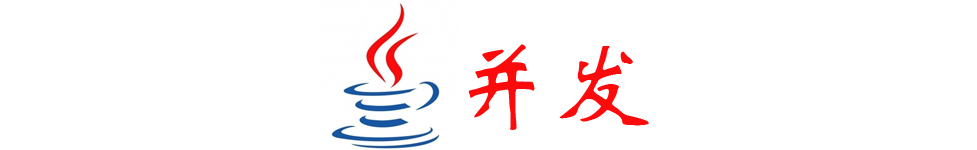
<style>
.page{position:relative;width:977px;height:150px;background:#ffffff}
.page>*{position:absolute;margin:0}
.t1{font:100px "STXinwei";color:#fb0b0c}
</style>
<div class="page">
<p class="t1" style="left:468px;top:44px;width:181px;height:86px">并发</p>
</div>
